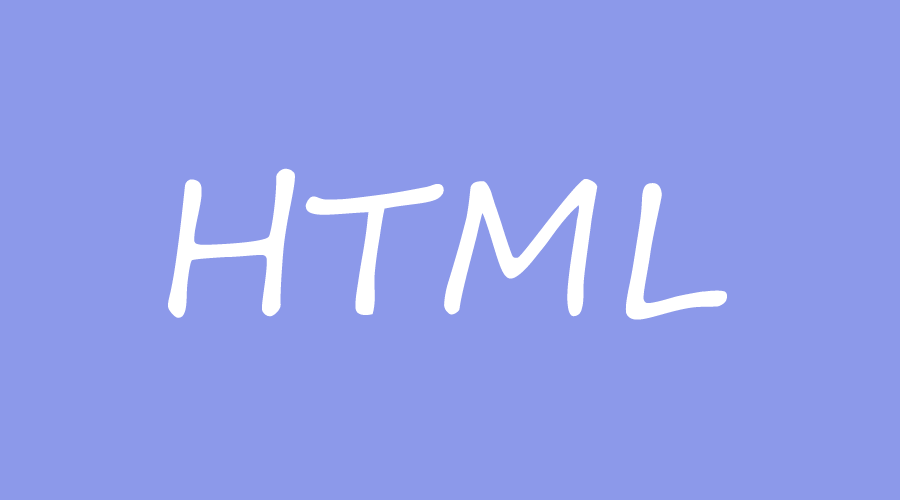
<style>
.page{position:relative;width:900px;height:500px;background:#8c99ea}
.page>*{position:absolute;margin:0}
.t1{font:180px "SegoeScript";color:#ffffff}
</style>
<div class="page">
<p class="t1" style="left:168px;top:168px;width:559px;height:152px">HTML</p>
</div>
